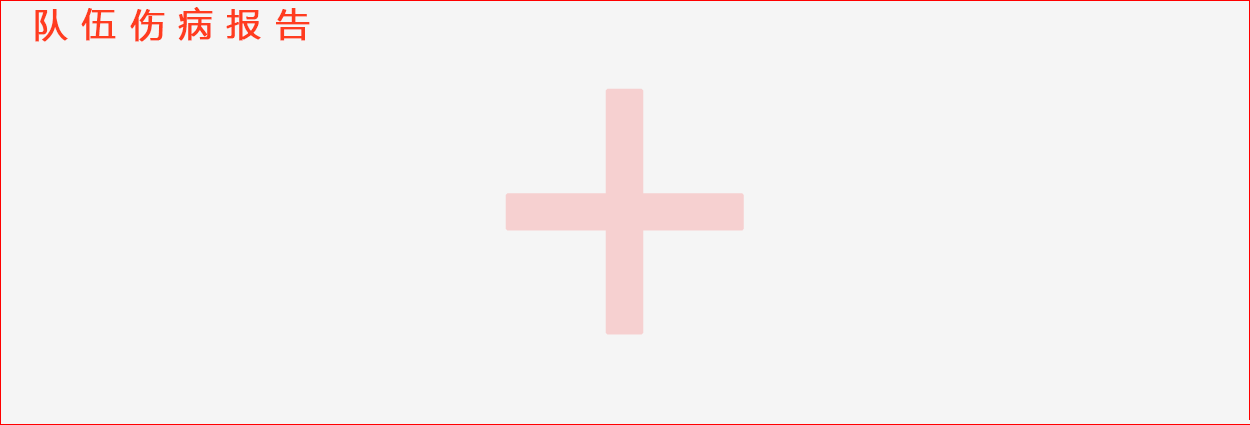
<style>
.page{position:relative;width:1250px;height:425px;background:#f5f5f5}
.page>*{position:absolute;margin:0}
.t1{font:33.9px "MicrosoftYaHei";letter-spacing:0.4em;color:#ff3c1f;font-weight:bold}
</style>
<div class="page">
<p class="t1" style="left:35px;top:7px;width:275px;height:35px">队伍伤病报告</p>
</div>
